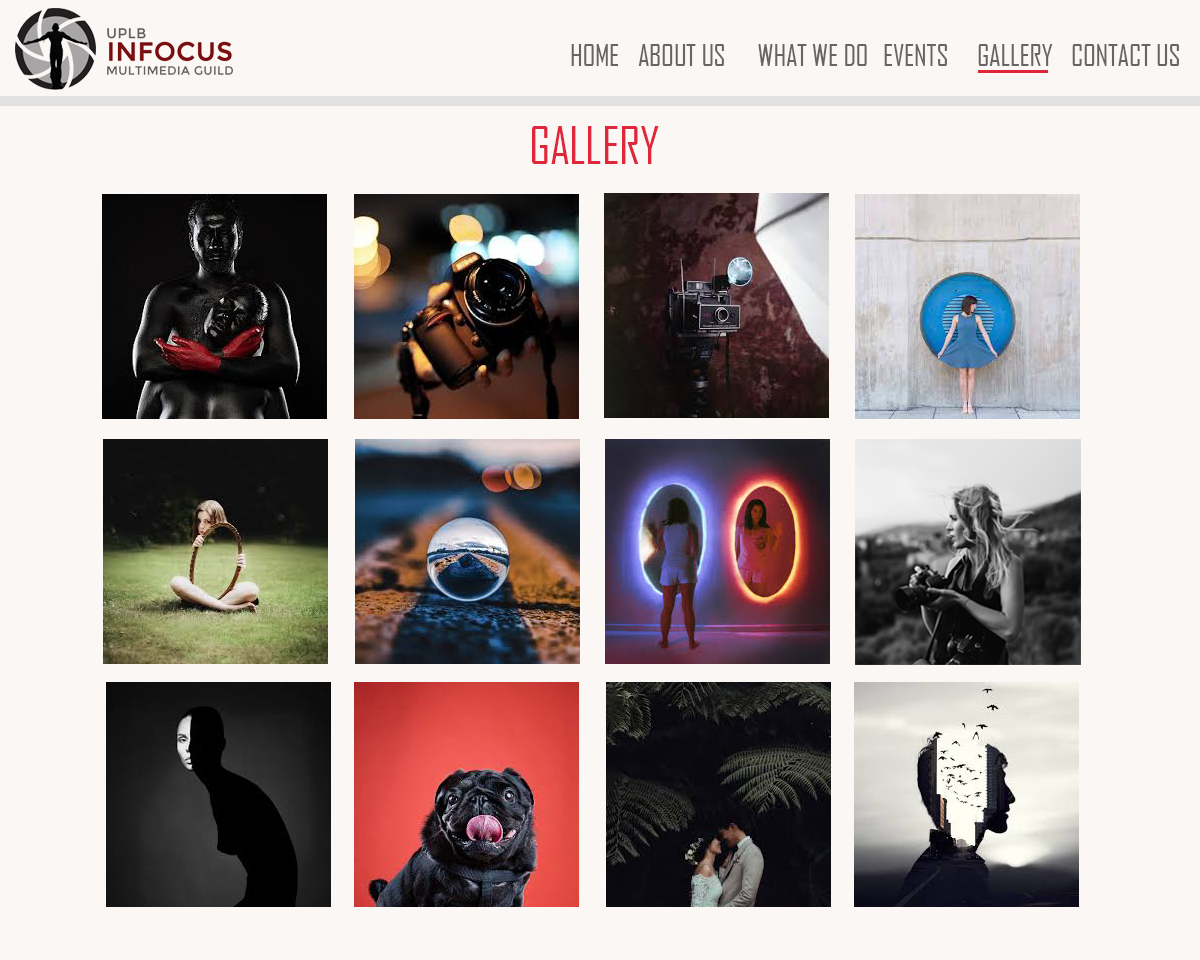
<style>
.page{position:relative;width:1200px;height:960px;background:#fbf7f5}
.page>*{position:absolute;margin:0}
.t1{font:29.3px "AgencyFB-Reg";letter-spacing:-0.01em;color:#676465;text-transform:uppercase}
.t2{font:50px "AgencyFB-Reg";letter-spacing:-0.01em;color:#df263b;text-transform:uppercase}
</style>
<div class="page">
<p class="t1" style="left:571px;top:44px;width:608px;height:22px">home   about us  what we do  events gallery contact us</p>
<p class="t2" style="left:532px;top:126px;width:127px;height:38px">gallery</p>
</div>
